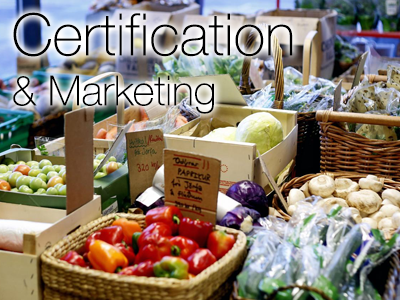
<style>
.page{position:relative;width:400px;height:300px}
.page>*{position:absolute;margin:0}
.t1{font:58.3px "HelveticaNeue-Thin";color:#000000}
.t2{font:41.7px "HelveticaNeue-Thin";color:#000000}
</style>
<div class="page">
<p class="t1" style="left:13px;top:12px;width:280px;height:102px">Certification<br><span class="t2">&amp; Marketing</span></p>
</div>
